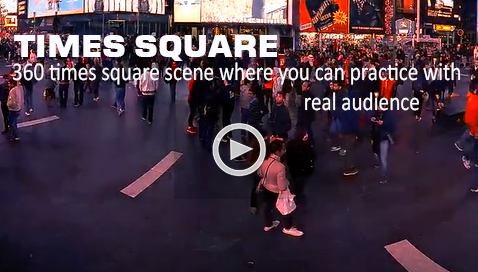
<style>
.page{position:relative;width:478px;height:272px}
.page>*{position:absolute;margin:0}
.t1{font:30px "Moire-ExtraBold";color:#fbfafe}
.t2{font:25.7px "Calibri";color:#fbfafe;scale:0.83 1}
</style>
<div class="page">
<p class="t1" style="left:14px;top:35px;width:263px;height:26px">TIMES SQUARE</p>
<p class="t2" style="left:13px;top:62px;width:448px;height:49px;text-align:center">360 times square scene where you can practice with <br>              real audience</p>
</div>
